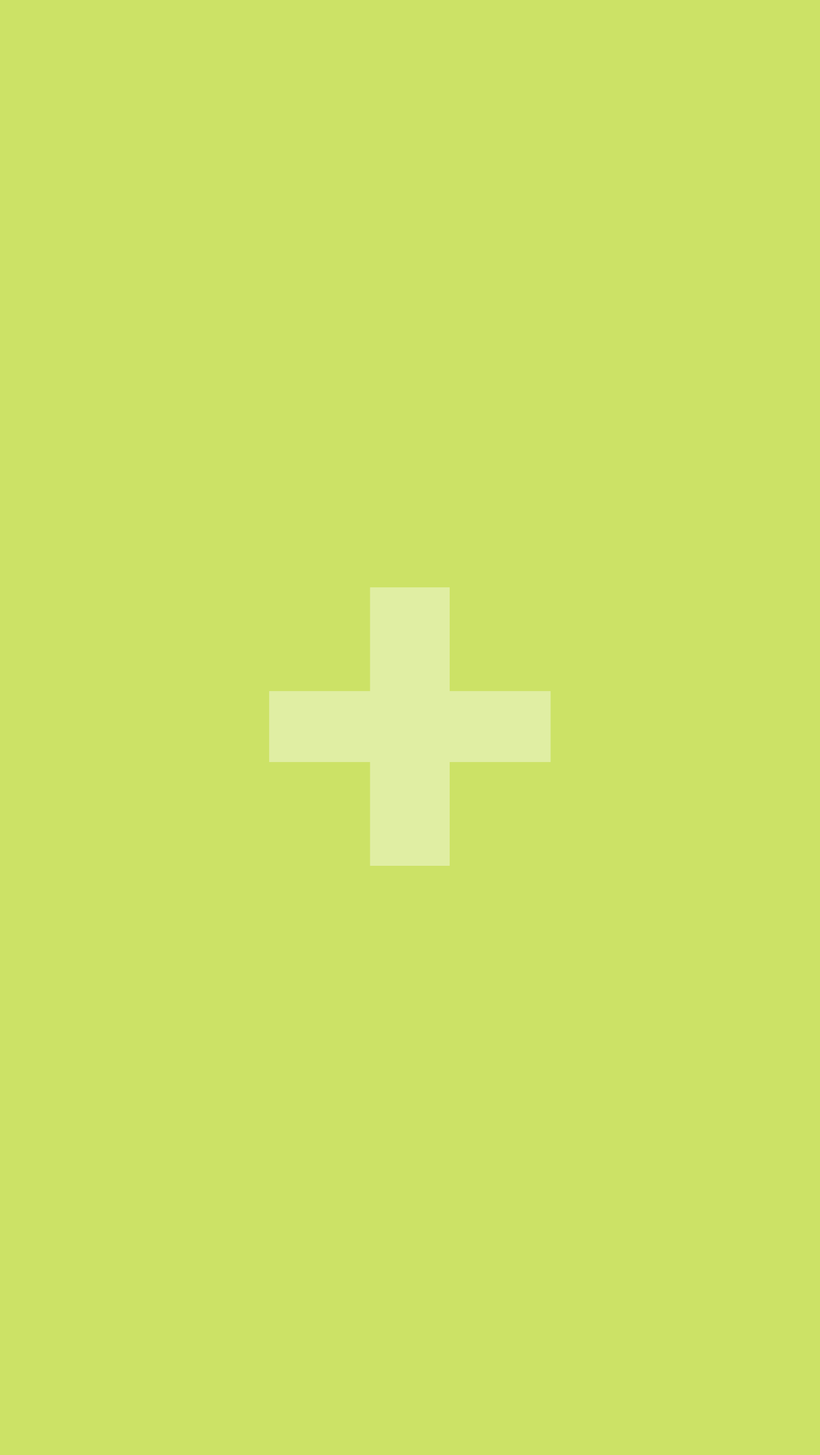
<style>
.page{position:relative;width:820px;height:1455px;background:#cce266}
.page>*{position:absolute;margin:0}
.t1{font:576.3px "Montserrat-Bold";letter-spacing:0.1em;color:#e0eea3}
</style>
<div class="page">
<p class="t1" style="left:269px;top:587px;width:282px;height:279px">+</p>
</div>
